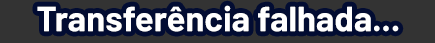
<style>
.page{position:relative;width:435px;height:43px;background:#333333}
.page>*{position:absolute;margin:0}
.t1{font:34.7px "Barlow-Bold";color:#ffffff}
</style>
<div class="page">
<p class="t1" style="left:37px;top:5px;width:362px;height:27px">Transferência falhada...</p>
</div>
